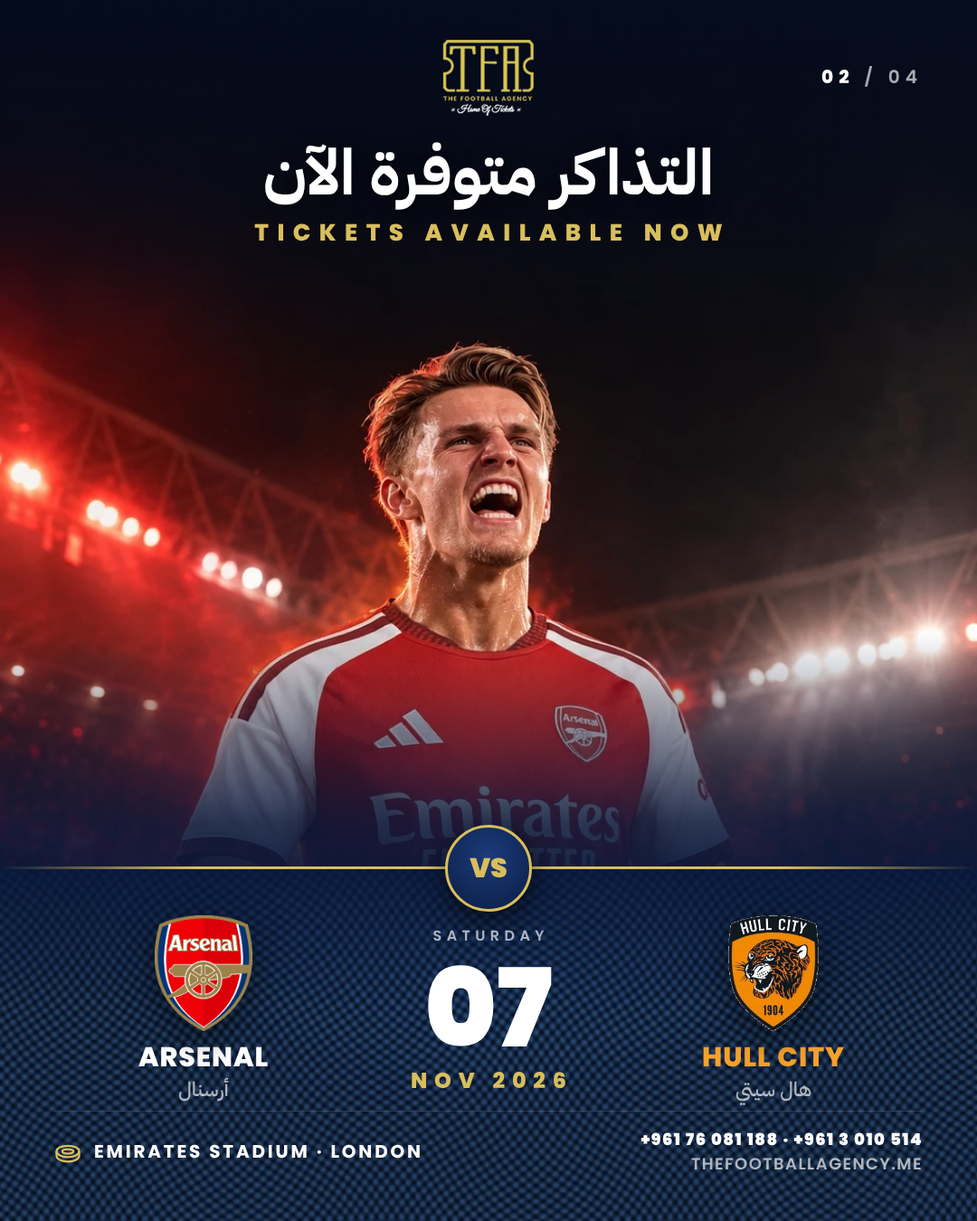
<style>
.page{position:relative;width:977px;height:1221px}
.page>*{position:absolute;margin:0}
.t1{font:18.1px "Poppins-SemiBold";letter-spacing:0.3em;color:#ffffff}
.t2{font:18.1px "Poppins-ExtraBold";letter-spacing:0.3em;color:#ffffff}
.t3{font:63.3px/76px "IBMPlexSansArabic-Bold";color:#ffffff}
.t4{font:23.5px "Poppins-ExtraBold";letter-spacing:0.36em;color:#d9be5c}
.t5{font:27.1px "Poppins-Black";color:#d9be5c}
.t6{font:14.5px "Poppins-SemiBold";letter-spacing:0.34em}
.t7{font:108.5px "Poppins-Black";color:#ffffff}
.t8{font:27.1px "Poppins-ExtraBold";letter-spacing:0.03em;color:#ffffff}
.t9{font:27.1px "Poppins-ExtraBold";letter-spacing:0.03em;color:#f5a12d}
.t10{font:21.7px "Poppins-ExtraBold";letter-spacing:0.32em;color:#d9be5c}
.t11{font:19.9px "IBMPlexSansArabic-Medium"}
.t12{font:16.3px/24.4px "Poppins-Black";letter-spacing:0.08em;color:#ffffff}
.t13{font:16.3px/24.4px "Poppins-SemiBold";letter-spacing:0.08em;color:#ffffff}
.t14{font:18.1px "Poppins-Bold";letter-spacing:0.14em;color:#ffffff}
</style>
<div class="page">
<p class="t1" style="left:821px;top:66px;width:96px;height:21px"><span class="t2">02</span> / 04</p>
<p class="t3" style="left:240px;top:122px;width:496px;height:116px;text-align:center">التذاكر متوفرة الآن</p>
<p class="t4" style="left:254px;top:223px;width:468px;height:18px">TICKETS AVAILABLE NOW</p>
<p class="t5" style="left:469px;top:857px;width:37px;height:21px">VS</p>
<p class="t6" style="left:433px;top:930px;width:111px;height:11px">SATURDAY</p>
<p class="t7" style="left:428px;top:965px;width:124px;height:81px">07</p>
<p class="t8" style="left:138px;top:1046px;width:130px;height:21px">ARSENAL</p>
<p class="t9" style="left:703px;top:1046px;width:141px;height:21px">HULL CITY</p>
<p class="t10" style="left:411px;top:1072px;width:154px;height:17px">NOV 2026</p>
<p class="t11" style="left:179px;top:1077px;width:50px;height:25px">أرسنال</p>
<p class="t11" style="left:735px;top:1081px;width:76px;height:24px">هال سيتي</p>
<p class="t12" style="left:640px;top:1132px;width:281px;height:38px;text-align:right">+961 76 081 188 · +961 3 010 514<span class="t13"><br>THEFOOTBALLAGENCY.ME</span></p>
<p class="t14" style="left:95px;top:1144px;width:325px;height:14px">EMIRATES STADIUM · LONDON</p>
</div>
